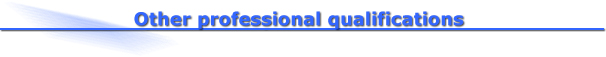
<style>
.page{position:relative;width:606px;height:57px;background:#ffffff}
.page>*{position:absolute;margin:0}
.t1{font:18px "Verdana-Bold";color:#3366ff}
</style>
<div class="page">
<p class="t1" style="left:134px;top:11px;width:330px;height:18px">Other professional qualifications</p>
</div>
